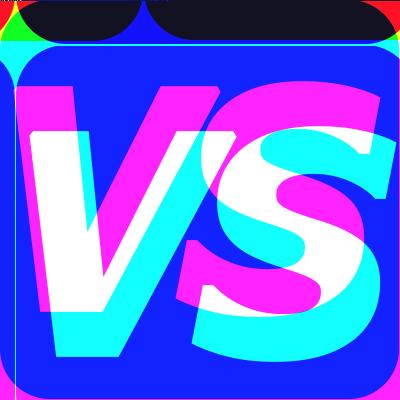
<style>
.page{position:relative;width:400px;height:400px;background:#1223ff}
.page>*{position:absolute;margin:0}
.t1{font:300px "Verdana-BoldItalic";letter-spacing:-0.075em;font-weight:bold;scale:0.9 1}
</style>
<div class="page">
<p class="t1" style="left:13px;top:80px;width:368px;height:236px">VS</p>
</div>
